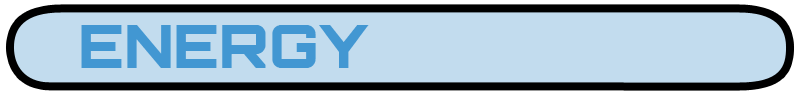
<style>
.page{position:relative;width:800px;height:95px;background:#c2dcee}
.page>*{position:absolute;margin:0}
.t1{font:59.8px "Orbitron-Black";color:#4297d2}
</style>
<div class="page">
<p class="t1" style="left:81px;top:25px;width:288px;height:43px">ENERGY</p>
</div>
